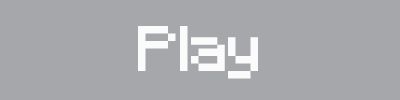
<style>
.page{position:relative;width:400px;height:100px;background:#a5a7aa}
.page>*{position:absolute;margin:0}
.t1{font:60px "Minecraft";color:#fbfbfc}
</style>
<div class="page">
<p class="t1" style="left:138px;top:26px;width:120px;height:53px">Play</p>
</div>
